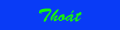
<style>
.page{position:relative;width:120px;height:30px;background:#093bf6}
.page>*{position:absolute;margin:0}
.t1{font:18px "VNI-Brush-Italic";color:#14f609}
</style>
<div class="page">
<p class="t1" style="left:39px;top:8px;width:43px;height:14px">Thoaùt</p>
</div>
